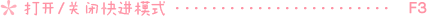
<style>
.page{position:relative;width:427px;height:16px;background:#ffffff}
.page>*{position:absolute;margin:0}
.t1{font:18px "¢è?";color:#ff93a5}
</style>
<div class="page">
<p class="t1" style="left:24px;top:1px;width:141px;height:15px">打开/关闭快进模式</p>
</div>
